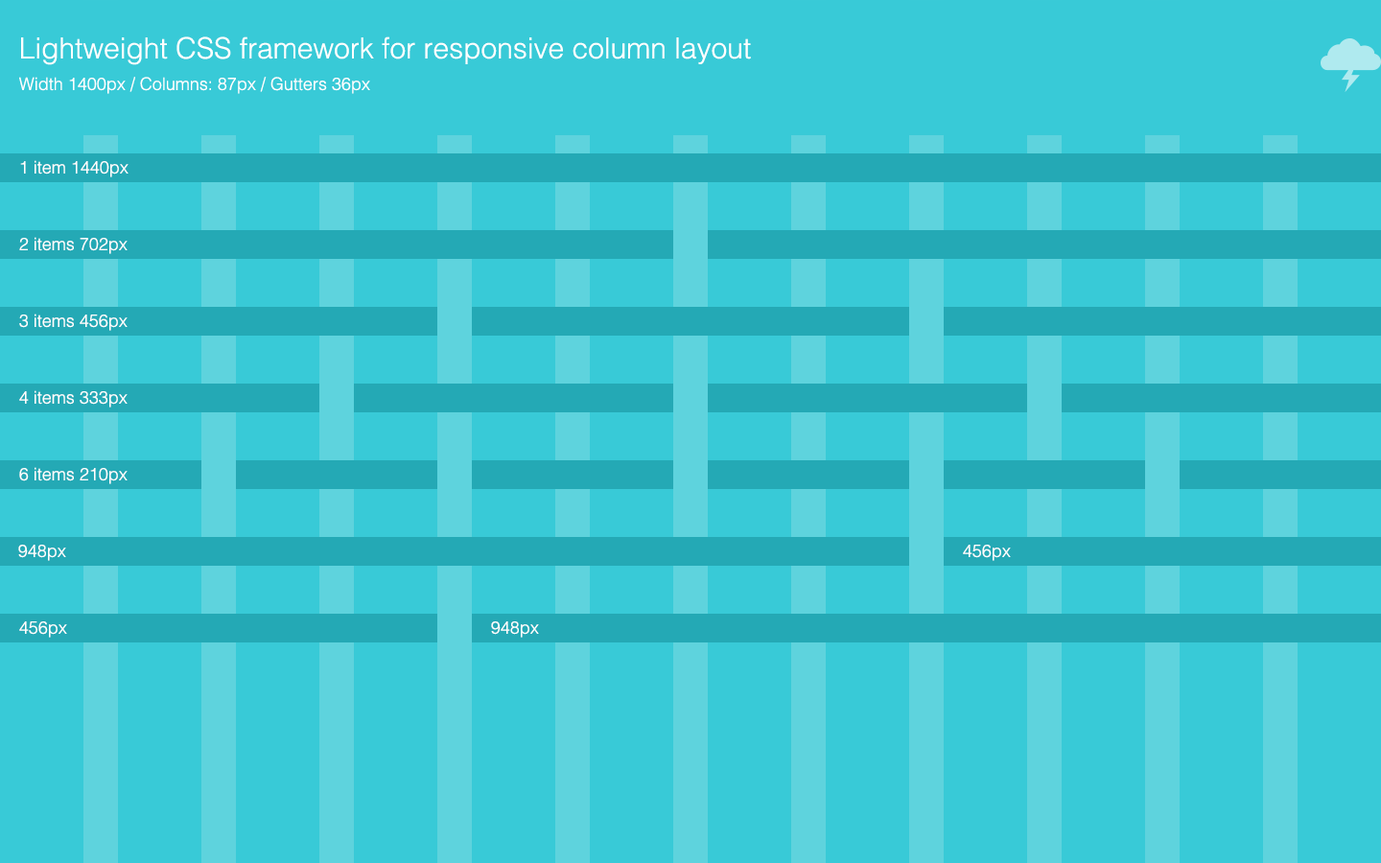
<style>
.page{position:relative;width:1381px;height:863px;background:#38cad7}
.page>*{position:absolute;margin:0}
.t1{font:28.8px/31.7px "Helvetica-Light";color:#ffffff}
.t2{font:17.3px/31.7px "Helvetica-Light";color:#ffffff}
.t3{font:17.3px "Helvetica-Light";color:#ffffff}
</style>
<div class="page">
<p class="t1" style="left:19px;top:36px;width:732px;height:58px">Lightweight CSS framework for responsive column layout<br><span class="t2">Width 1400px / Columns: 87px / Gutters 36px</span></p>
<p class="t3" style="left:20px;top:160px;width:109px;height:17px">1 item 1440px</p>
<p class="t3" style="left:19px;top:237px;width:109px;height:17px">2 items 702px</p>
<p class="t3" style="left:19px;top:314px;width:109px;height:17px">3 items 456px</p>
<p class="t3" style="left:19px;top:390px;width:109px;height:18px">4 items 333px</p>
<p class="t3" style="left:19px;top:467px;width:109px;height:17px">6 items 210px</p>
<p class="t3" style="left:18px;top:545px;width:48px;height:16px">948px</p>
<p class="t3" style="left:963px;top:545px;width:48px;height:16px">456px</p>
<p class="t3" style="left:19px;top:622px;width:48px;height:16px">456px</p>
<p class="t3" style="left:491px;top:622px;width:48px;height:16px">948px</p>
</div>
